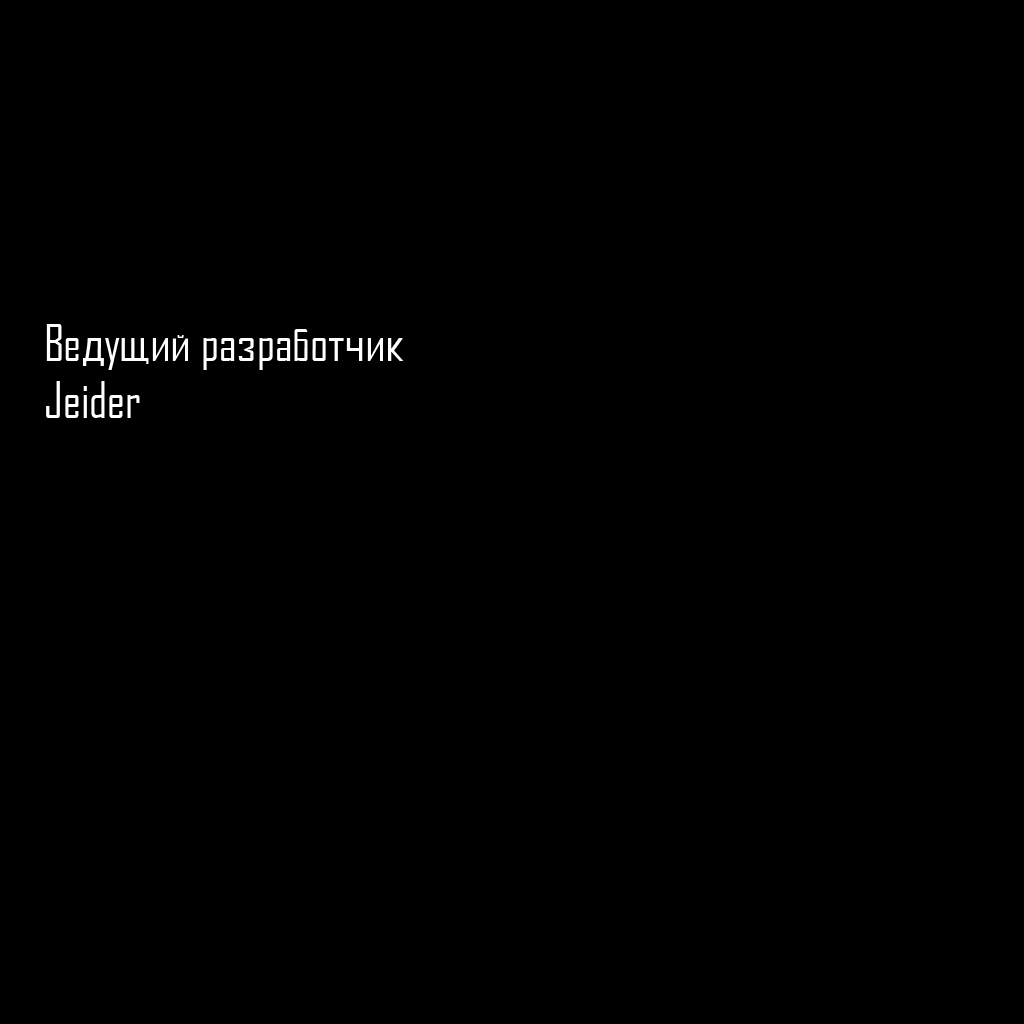
<style>
.page{position:relative;width:1024px;height:1024px;background:#000000}
.page>*{position:absolute;margin:0}
.t1{font:48px "AgencyFBCyrillic";color:#ffffff}
</style>
<div class="page">
<p class="t1" style="left:46px;top:324px;width:358px;height:94px">Ведущий разработчик<br>Jeider</p>
</div>
